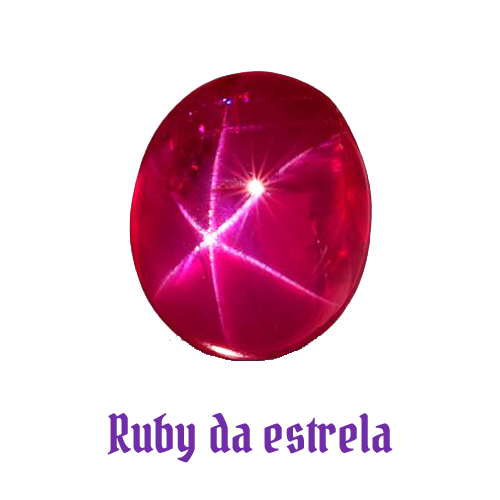
<style>
.page{position:relative;width:500px;height:500px;background:#ffffff}
.page>*{position:absolute;margin:0}
.t1{font:52.1px "PirataOne-Regular";color:#6f2da8}
</style>
<div class="page">
<p class="t1" style="left:107px;top:413px;width:286px;height:50px">Ruby da estrela</p>
</div>
